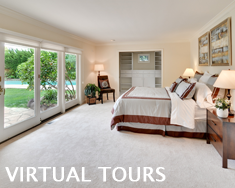
<style>
.page{position:relative;width:235px;height:188px}
.page>*{position:absolute;margin:0}
.t1{font:20px "LucidaSansUnicode";color:#ffffff;font-weight:bold}
</style>
<div class="page">
<p class="t1" style="left:5px;top:167px;width:161px;height:15px">VIRTUAL TOURS</p>
</div>
